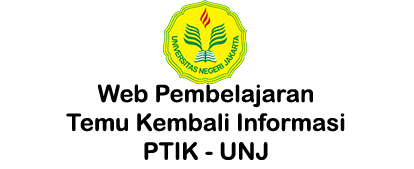
<style>
.page{position:relative;width:414px;height:169px;background:#ffffff}
.page>*{position:absolute;margin:0}
.t1{font:24px "ArialRoundedMTBold";color:#020202}
</style>
<div class="page">
<p class="t1" style="left:66px;top:84px;width:279px;height:76px;text-align:center">Web Pembelajaran<br>Temu Kembali Informasi<br>PTIK - UNJ</p>
</div>
